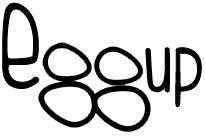
<style>
.page{position:relative;width:205px;height:136px;background:#ffffff}
.page>*{position:absolute;margin:0}
.t1{font:123.5px "FISHfingers-Light";letter-spacing:-0.26em;color:#000000}
.t2{font:63.9px "FISHfingers";color:#000000}
.t3{font:86.8px "FISHfingers";color:#000000}
</style>
<div class="page">
<p class="t1" style="left:2px;top:3px;width:37px;height:86px">e</p>
<p class="t2" style="left:146px;top:48px;width:23px;height:44px">u</p>
<p class="t3" style="left:175px;top:47px;width:27px;height:60px">p</p>
</div>
